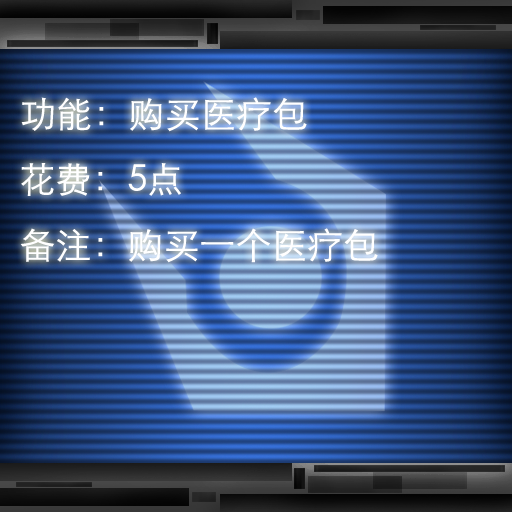
<style>
.page{position:relative;width:512px;height:512px}
.page>*{position:absolute;margin:0}
.t1{font:36px "STXihei";color:#ffffff}
</style>
<div class="page">
<p class="t1" style="left:21px;top:97px;width:286px;height:35px">功能：购买医疗包</p>
<p class="t1" style="left:21px;top:163px;width:160px;height:33px">花费：5点</p>
<p class="t1" style="left:20px;top:228px;width:358px;height:35px">备注：购买一个医疗包</p>
</div>
